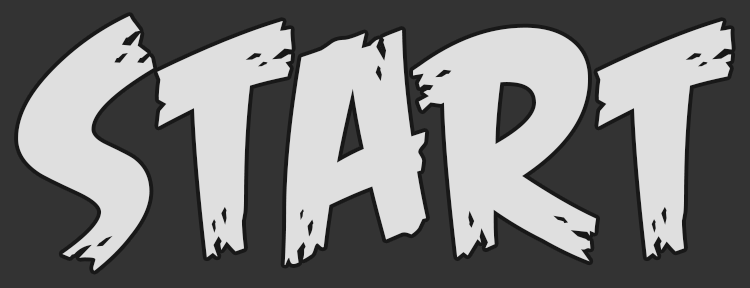
<style>
.page{position:relative;width:750px;height:288px;background:#333333}
.page>*{position:absolute;margin:0}
.t1{font:300px "FeastofFleshBB";color:#dfdfdf}
</style>
<div class="page">
<p class="t1" style="left:18px;top:16px;width:714px;height:255px">START</p>
</div>
